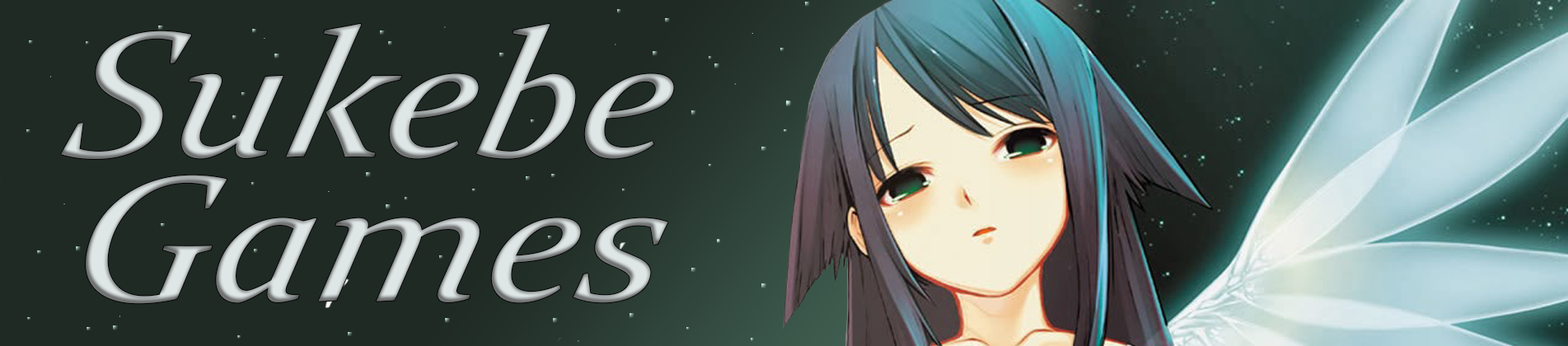
<style>
.page{position:relative;width:1568px;height:346px;background:#1f2a24}
.page>*{position:absolute;margin:0}
.t1{font:180.2px/144.2px "Constantia-Italic";font-style:italic;scale:1.13 1}
</style>
<div class="page">
<p class="t1" style="left:61px;top:23px;width:613px;height:281px;text-align:center">Sukebe<br>Games</p>
</div>
